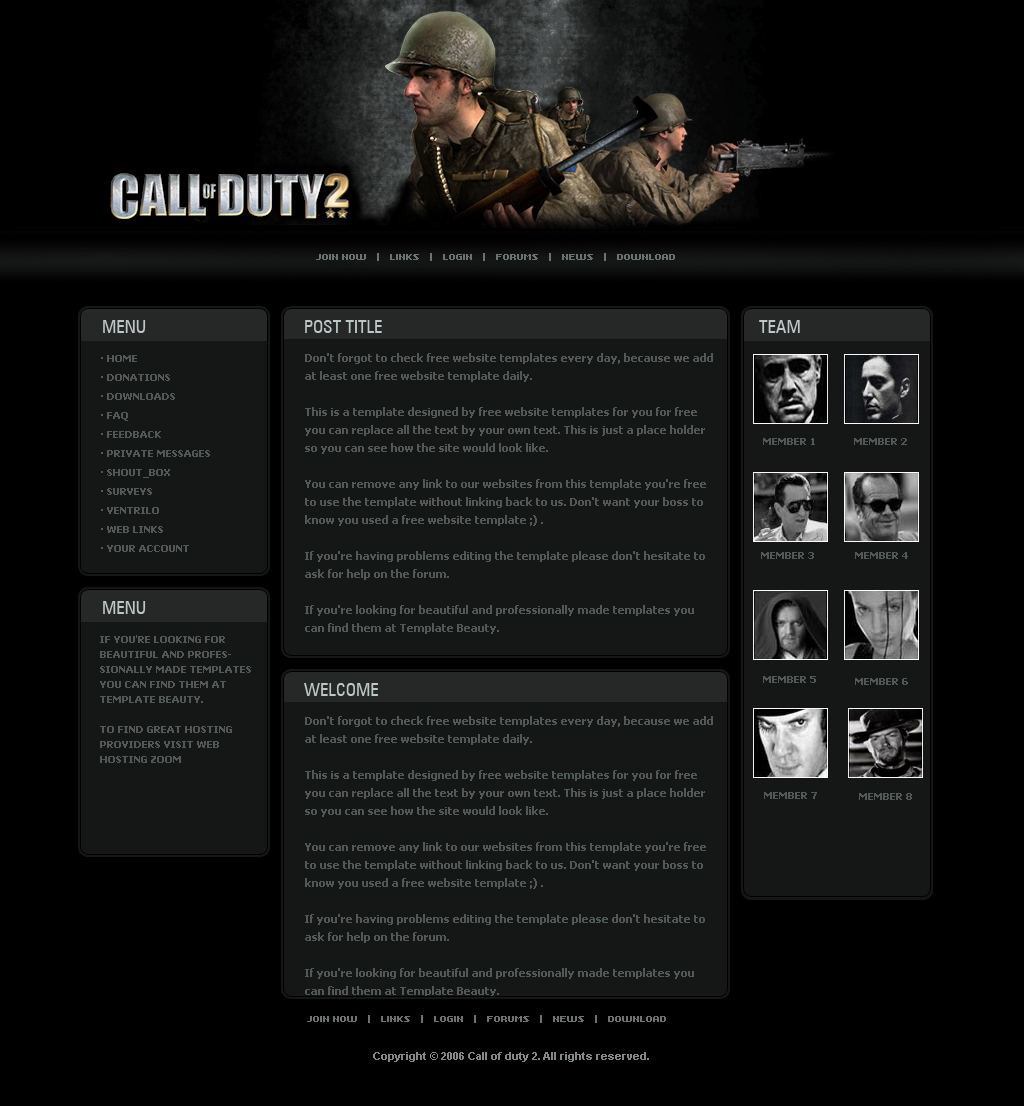
<style>
.page{position:relative;width:1024px;height:1106px;background:#000000}
.page>*{position:absolute;margin:0}
.t1{font:8px "Kroeger0663";color:#6b7272;text-transform:uppercase}
.t2{font:18px "ZurichBT-RomanCondensed";color:#bec7c7;text-transform:uppercase}
.t3{font:11px/18px "Tahoma-Bold";color:#525757}
.t4{font:10px/19px "Tahoma-Bold";color:#525757;text-transform:uppercase}
.t5{font:10px "Tahoma-Bold";color:#525757;text-transform:uppercase}
.t6{font:10px/15px "Tahoma-Bold";color:#525757;text-transform:uppercase}
.t7{font:11px "Arial-BoldMT";color:#838888}
</style>
<div class="page">
<p class="t1" style="left:316px;top:253px;width:359px;height:8px">Join now   |   Links   |   Login   |   Forums   |   News   |   Download</p>
<p class="t2" style="left:103px;top:320px;width:43px;height:13px">MENU</p>
<p class="t2" style="left:305px;top:320px;width:77px;height:13px">Post Title</p>
<p class="t2" style="left:759px;top:320px;width:41px;height:13px">Team</p>
<p class="t3" style="left:305px;top:353px;width:408px;height:281px">Don't forgot to check free website templates every day, because we add at least one free website template daily.<br><br>This is a template designed by free website templates for you for free you can replace all the text by your own text. This is just a place holder so you can see how the site would look like.<br><br>You can remove any link to our websites from this template you're free to use the template without linking back to us. Don't want your boss to know you used a free website template ;) .<br><br>If you're having problems editing the template please don't hesitate to ask for help on the forum.<br><br>If you're looking for beautiful and professionally made templates you can find them at Template Beauty.<br><br>To find great hosting providers visit Web Hosting Zoom</p>
<p class="t4" style="left:101px;top:355px;width:109px;height:197px">· Home<br>· Donations<br>· Downloads<br>· FAQ<br>· Feedback<br>· Private Messages<br>· Shout_Box<br>· Surveys<br>· Ventrilo<br>· Web Links<br>· Your Account</p>
<p class="t5" style="left:763px;top:438px;width:52px;height:7px">Member 1</p>
<p class="t5" style="left:854px;top:438px;width:53px;height:7px">Member 2</p>
<p class="t5" style="left:761px;top:552px;width:53px;height:7px">Member 3</p>
<p class="t5" style="left:855px;top:552px;width:53px;height:7px">Member 4</p>
<p class="t2" style="left:103px;top:601px;width:43px;height:13px">Menu</p>
<p class="t6" style="left:100px;top:635px;width:151px;height:128px">If you're looking for beautiful and professionally made templates you can find them at Template Beauty.<br><br>To find great hosting providers visit Web Hosting Zoom</p>
<p class="t5" style="left:763px;top:676px;width:53px;height:7px">Member 5</p>
<p class="t5" style="left:855px;top:678px;width:53px;height:7px">Member 6</p>
<p class="t2" style="left:304px;top:683px;width:74px;height:13px">welcome</p>
<p class="t3" style="left:305px;top:716px;width:408px;height:281px">Don't forgot to check free website templates every day, because we add at least one free website template daily.<br><br>This is a template designed by free website templates for you for free you can replace all the text by your own text. This is just a place holder so you can see how the site would look like.<br><br>You can remove any link to our websites from this template you're free to use the template without linking back to us. Don't want your boss to know you used a free website template ;) .<br><br>If you're having problems editing the template please don't hesitate to ask for help on the forum.<br><br>If you're looking for beautiful and professionally made templates you can find them at Template Beauty.</p>
<p class="t5" style="left:764px;top:792px;width:53px;height:7px">Member 7</p>
<p class="t5" style="left:859px;top:793px;width:53px;height:7px">Member 8</p>
<p class="t1" style="left:307px;top:1015px;width:359px;height:8px">Join now   |   Links   |   Login   |   Forums   |   News   |   Download</p>
<p class="t7" style="left:373px;top:1052px;width:276px;height:10px">Copyright © 2006 Call of duty 2. All rights reserved.</p>
</div>
